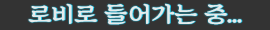
<style>
.page{position:relative;width:270px;height:30px;background:#333333}
.page>*{position:absolute;margin:0}
.t1{font:23.3px "SDKukdetopokki-aLt";color:#faffff;scale:1.08 1}
</style>
<div class="page">
<p class="t1" style="left:28px;top:3px;width:214px;height:22px;opacity:0.9">로비로 들어가는 중...</p>
</div>
